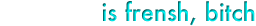
<style>
.page{position:relative;width:256px;height:26px;background:#ffffff}
.page>*{position:absolute;margin:0}
.t1{font:24px "Futura-Medium"}
</style>
<div class="page">
<p class="t1" style="left:102px;top:1px;width:153px;height:25px">is frensh, bitch</p>
</div>
